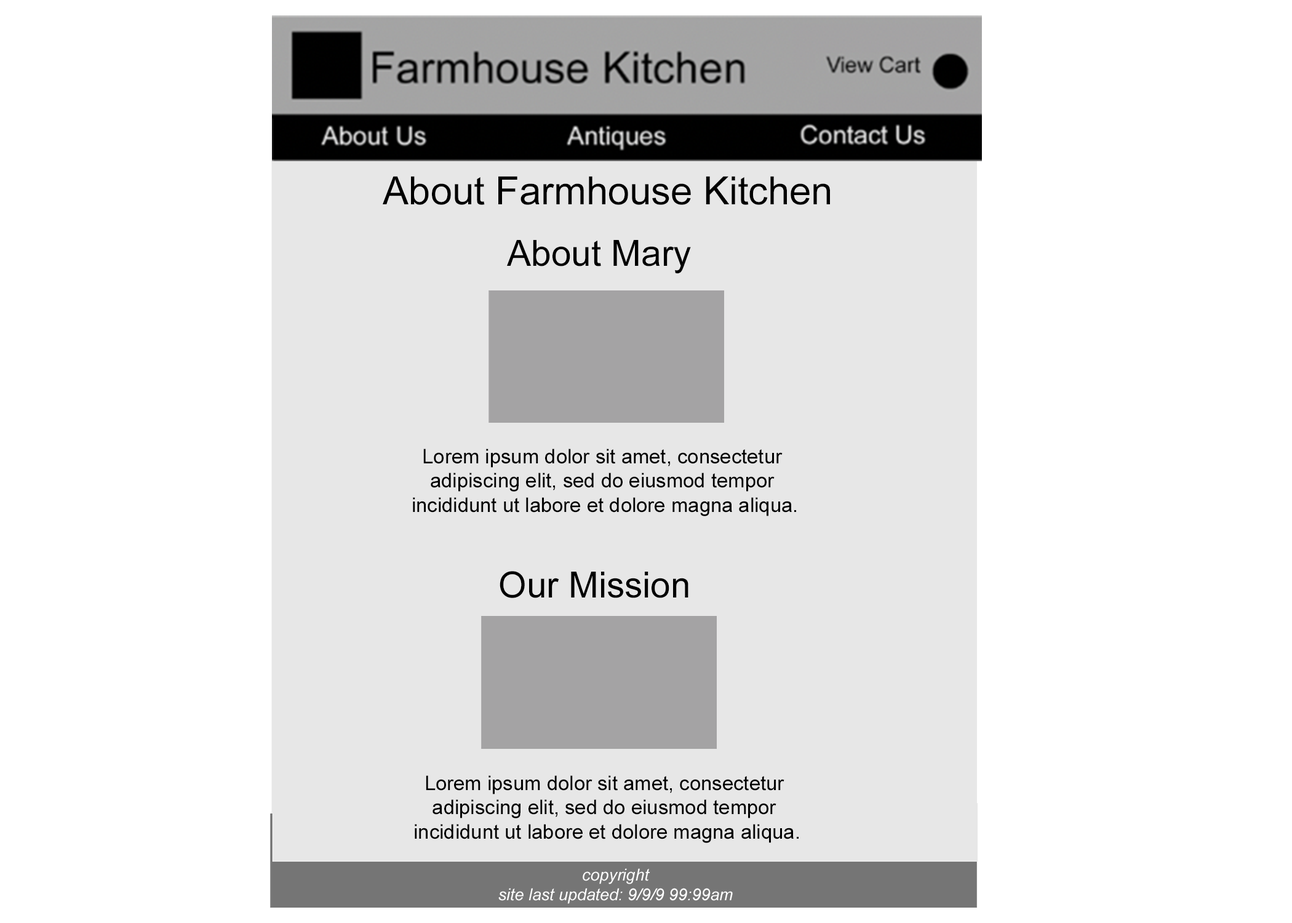
<style>
.page{position:relative;width:1292px;height:923px;background:#ffffff}
.page>*{position:absolute;margin:0}
.t1{font:38.9px "ArialMT";color:#000000}
.t2{font:36px "ArialMT";color:#000000}
.t3{font:20.2px "ArialMT";color:#000000}
.t4{font:16.5px "Arial-ItalicMT";color:#ffffff}
</style>
<div class="page">
<p class="t1" style="left:383px;top:176px;width:447px;height:29px">About Farmhouse Kitchen</p>
<p class="t2" style="left:507px;top:240px;width:184px;height:34px">About Mary</p>
<p class="t3" style="left:413px;top:449px;width:383px;height:67px;text-align:center">Lorem ipsum dolor sit amet, consectetur <br>adipiscing elit, sed do eiusmod tempor <br>incididunt ut labore et dolore magna aliqua.</p>
<p class="t2" style="left:500px;top:571px;width:188px;height:27px">Our Mission</p>
<p class="t3" style="left:415px;top:775px;width:384px;height:68px;text-align:center">Lorem ipsum dolor sit amet, consectetur <br>adipiscing elit, sed do eiusmod tempor <br>incididunt ut labore et dolore magna aliqua.</p>
<p class="t4" style="left:498px;top:868px;width:235px;height:36px;text-align:center">copyright<br>site last updated: 9/9/9 99:99am</p>
</div>
